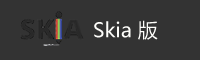
<style>
.page{position:relative;width:200px;height:60px;background:#333333}
.page>*{position:absolute;margin:0}
.t1{font:20px "MicrosoftYaHei";color:#fefefb}
</style>
<div class="page">
<p class="t1" style="left:94px;top:20px;width:64px;height:20px">Skia 版</p>
</div>
